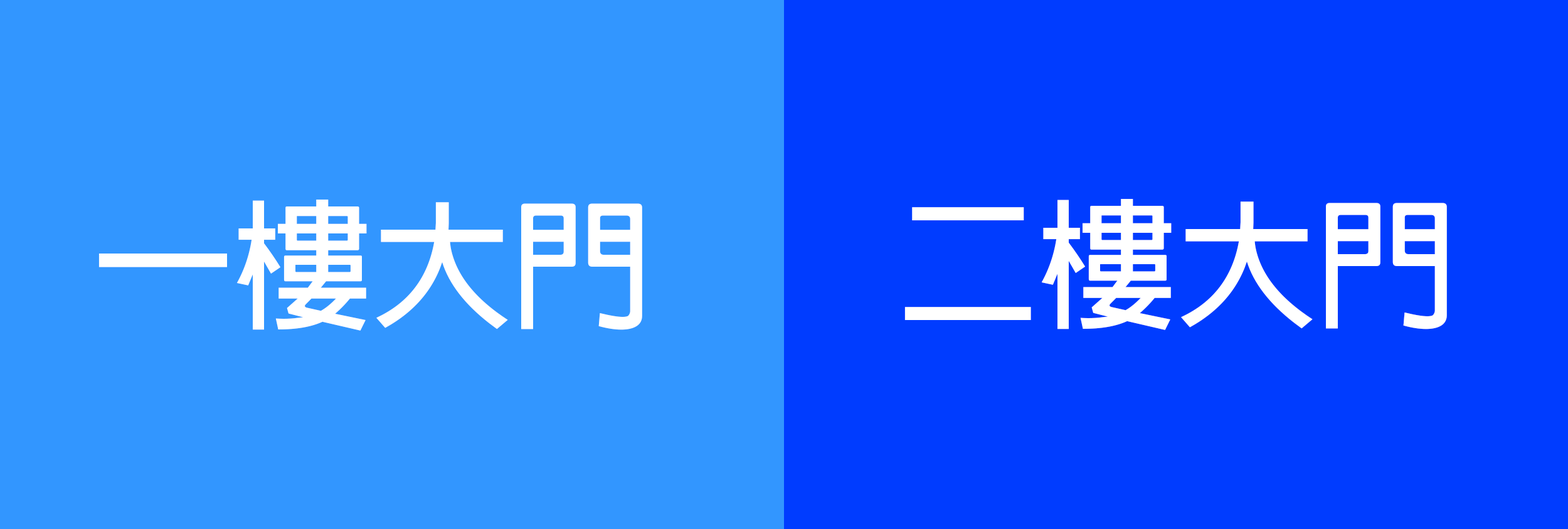
<style>
.page{position:relative;width:1568px;height:529px;background:#3296ff}
.page>*{position:absolute;margin:0}
.t1{font:139.7px "AdobeFanHeitiStd-Bold";color:#ffffff}
</style>
<div class="page">
<p class="t1" style="left:98px;top:199px;width:544px;height:132px">一樓大門</p>
<p class="t1" style="left:904px;top:199px;width:543px;height:131px">二樓大門</p>
</div>
